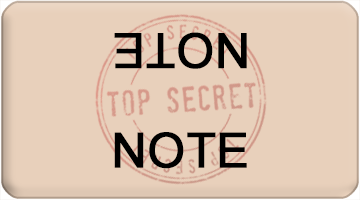
<style>
.page{position:relative;width:360px;height:200px;background:#e8d0bb}
.page>*{position:absolute;margin:0}
.t1{font:48px "ArialMT";color:#000000;font-weight:bold}
</style>
<div class="page">
<p class="t1" style="left:114px;top:32px;width:133px;height:37px;rotate:180deg">NOTE</p>
<p class="t1" style="left:114px;top:132px;width:133px;height:37px">NOTE</p>
</div>
